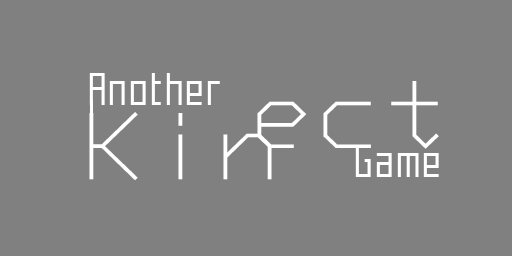
<style>
.page{position:relative;width:512px;height:256px;background:#808080}
.page>*{position:absolute;margin:0}
.t1{font:47.3px "Mecha";color:#ffffff}
.t2{font:92px "Monotxt_IV25";color:#ffffff}
</style>
<div class="page">
<p class="t1" style="left:89px;top:73px;width:131px;height:32px">Another</p>
<p class="t2" style="left:257px;top:81px;width:182px;height:68px">ect</p>
<p class="t2" style="left:89px;top:112px;width:183px;height:69px">Kin</p>
<p class="t1" style="left:355px;top:145px;width:84px;height:32px">Game</p>
</div>
